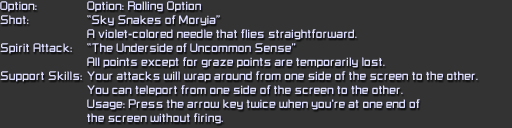
<style>
.page{position:relative;width:512px;height:128px;background:#333333}
.page>*{position:absolute;margin:0}
.t1{font:10px/14px "RussellSquare";color:#ddddff}
</style>
<div class="page">
<p class="t1" style="left:0px;top:1px;width:82px;height:81px">Option:<br>Shot:<br><br>Spirit Attack:<br><br>Support Skills:</p>
<p class="t1" style="left:87px;top:1px;width:391px;height:123px">Option: Rolling Option<br>“Sky Snakes of Moryia”<br>A violet-colored needle that flies straightforward.<br>“The Underside of Uncommon Sense”<br>All points except for graze points are temporarily lost.<br>Your attacks will wrap around from one side of the screen to the other.<br>You can teleport from one side of the screen to the other.<br>Usage: Press the arrow key twice when you're at one end of<br>the screen without firing.</p>
</div>
